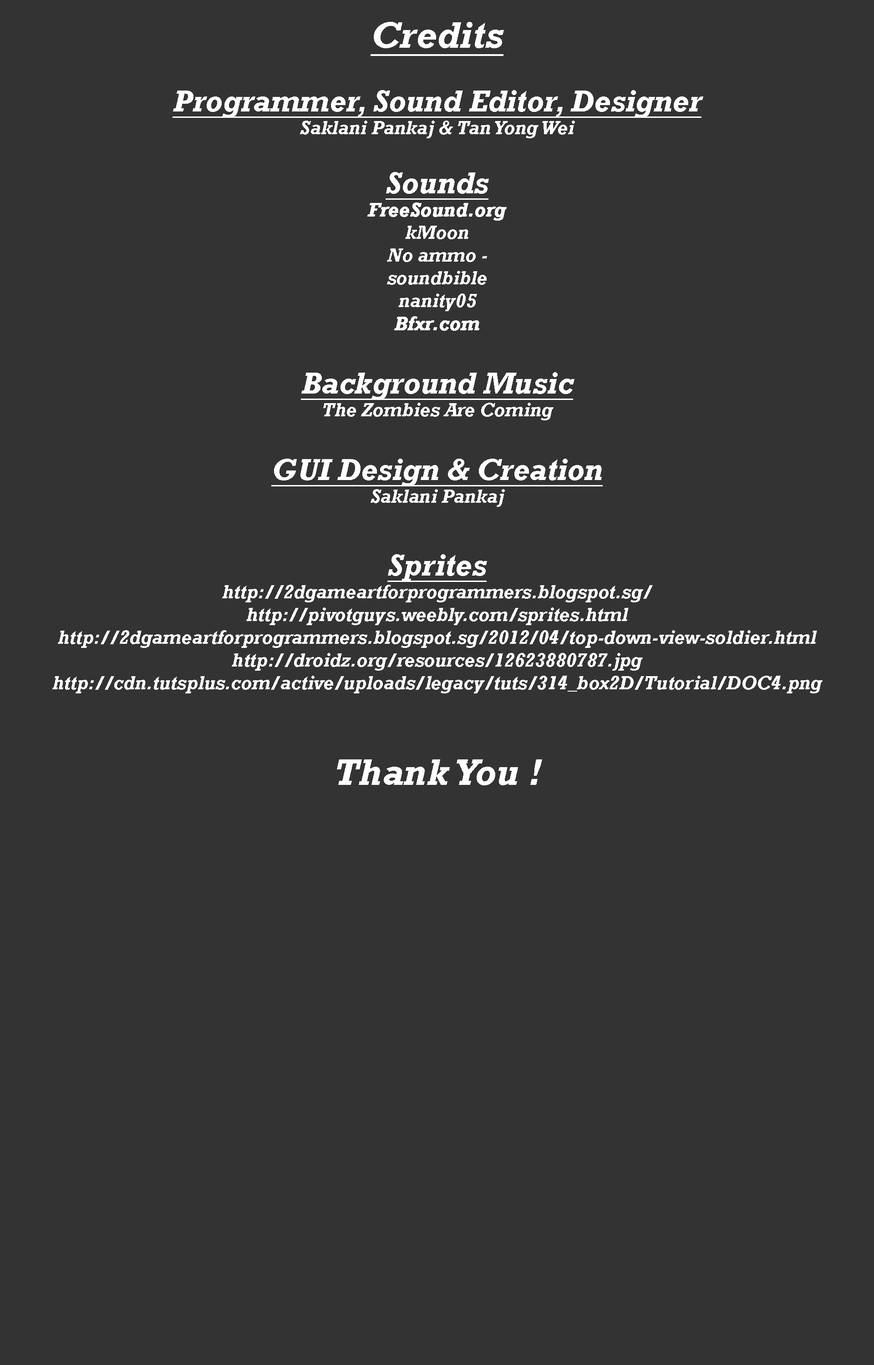
<style>
.page{position:relative;width:874px;height:1365px;background:#333333}
.page>*{position:absolute;margin:0}
.t1{font:19px "Rockwell-BoldItalic";color:#ffffff}
.t2{font:37.9px "Rockwell-BoldItalic";color:#ffffff;text-decoration:underline}
.t3{font:30.3px "Rockwell-BoldItalic";color:#ffffff;text-decoration:underline}
.t4{font:19px "Rockwell-BoldItalic";color:#ffffff;font-weight:bold}
.t5{font:37.9px "Rockwell-BoldItalic";color:#ffffff}
</style>
<div class="page">
<p class="t1" style="left:52px;top:22px;width:770px;height:763px;text-align:center"><span class="t2">Credits<br><br></span><span class="t3">Programmer, Sound Editor, Designer<br></span>Saklani Pankaj &amp; Tan Yong Wei<br><br><span class="t3">Sounds<br></span><span class="t4">FreeSound.org<br></span>kMoon<br>No ammo - <br>soundbible<br>nanity05<br><span class="t4">Bfxr.com<br><br></span><span class="t3">Background Music<br></span>The Zombies Are Coming<br><br><span class="t3">GUI Design &amp; Creation<br></span>Saklani Pankaj<br><span class="t3"><br>Sprites<br></span>http://2dgameartforprogrammers.blogspot.sg/<br>http://pivotguys.weebly.com/sprites.html<br>http://2dgameartforprogrammers.blogspot.sg/2012/04/top-down-view-soldier.html<br>http://droidz.org/resources/12623880787.jpg<br>http://cdn.tutsplus.com/active/uploads/legacy/tuts/314_box2D/Tutorial/DOC4.png<br><br><br><span class="t5">Thank You !</span></p>
</div>
